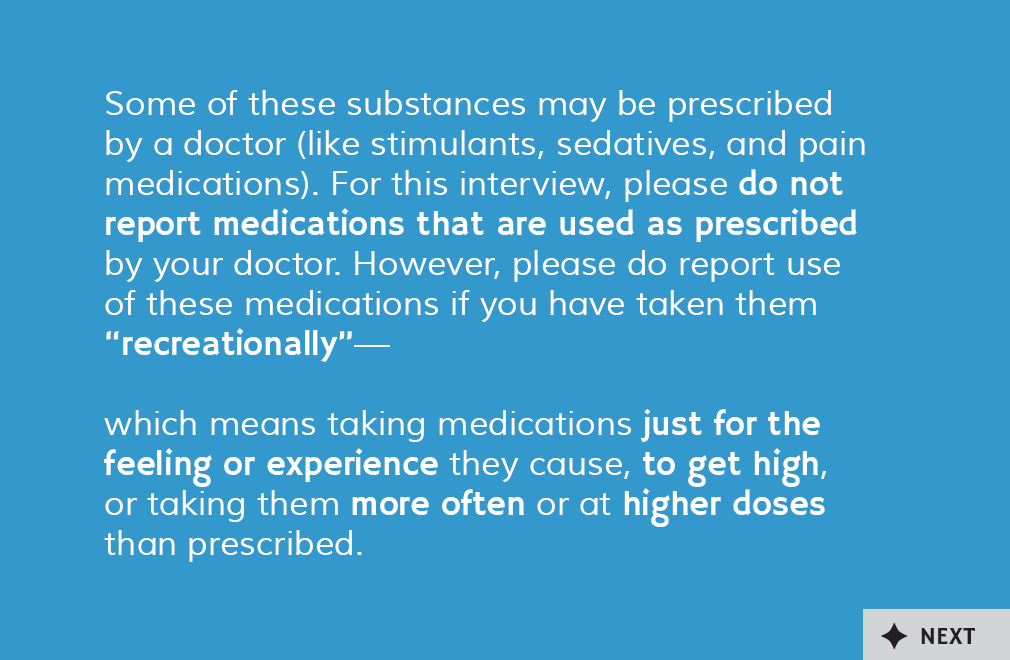
<style>
.page{position:relative;width:1010px;height:660px;background:#3398cc}
.page>*{position:absolute;margin:0}
.t1{font:34px/40px "Muli";color:#ffffff}
.t2{font:34px/40px "HammersmithOne-Regular";color:#ffffff}
.t3{font:25px "HammersmithOne-Regular";color:#231f20}
</style>
<div class="page">
<p class="t1" style="left:104px;top:90px;width:761px;height:472px">Some of these substances may be prescribed <br>by a doctor (like stimulants, sedatives, and pain medications). For this interview, please <span class="t2">do not <br>report medications that are used as prescribed </span><br>by your doctor. However, please do report use <br>of these medications if you have taken them <span class="t2">“recreationally”</span>— <br><br>which means taking medications <span class="t2">just for the <br>feeling or experience </span>they cause, <span class="t2">to get high</span>, <br>or taking them <span class="t2">more often </span>or at <span class="t2">higher doses </span><br>than prescribed.</p>
<p class="t3" style="left:921px;top:627px;width:54px;height:17px">NEXT</p>
</div>
